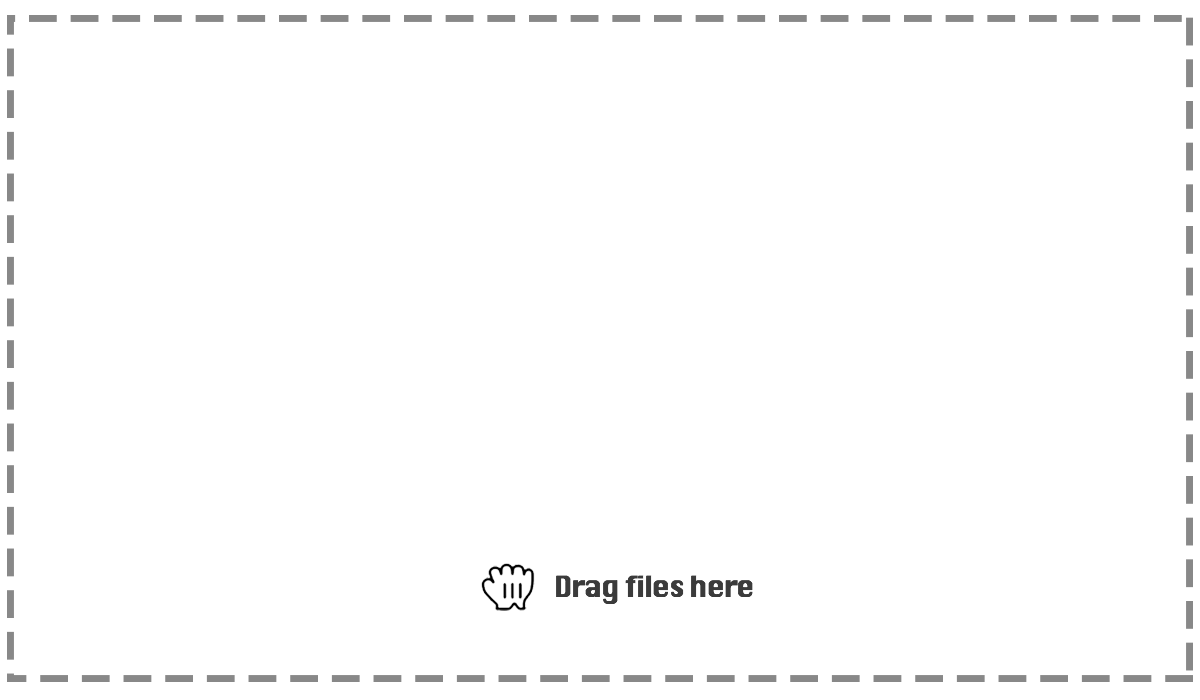
<style>
.page{position:relative;width:1200px;height:700px;background:#ffffff}
.page>*{position:absolute;margin:0}
.t1{font:27.8px "Silom";letter-spacing:-0.05em;color:#3b3b3b}
</style>
<div class="page">
<p class="t1" style="left:556px;top:575px;width:197px;height:29px">Drag files here</p>
</div>
